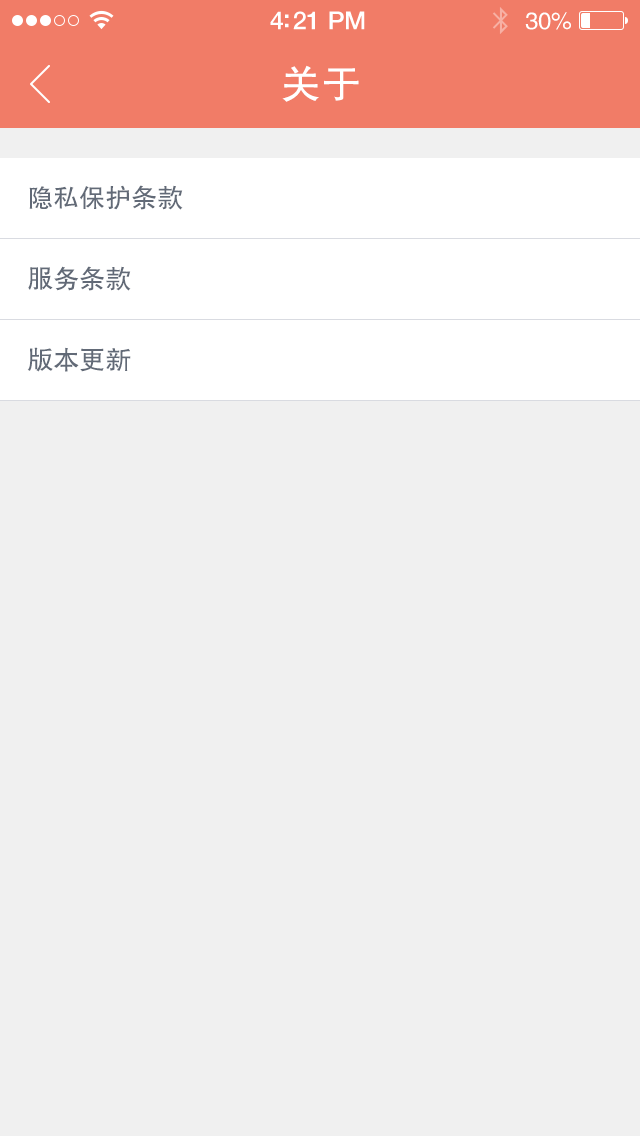
<style>
.page{position:relative;width:640px;height:1136px;background:#f0f0f0}
.page>*{position:absolute;margin:0}
.t1{font:25px "HelveticaNeue-Medium";letter-spacing:-0.02em;color:#ffffff}
.t2{font:24px "FZHTJW--GB1-0";letter-spacing:-0.02em;color:#ffffff}
.t3{font:40px "FZHTJW--GB1-0";color:#ffffff}
.t4{font:26px "FZHTJW--GB1-0";color:#626a77}
</style>
<div class="page">
<p class="t1" style="left:270px;top:11px;width:95px;height:19px">4:21 PM</p>
<p class="t2" style="left:525px;top:12px;width:46px;height:18px">30%</p>
<p class="t3" style="left:282px;top:65px;width:77px;height:37px">关于</p>
<p class="t4" style="left:29px;top:185px;width:154px;height:25px">隐私保护条款</p>
<p class="t4" style="left:28px;top:266px;width:103px;height:25px">服务条款</p>
<p class="t4" style="left:27px;top:347px;width:104px;height:25px">版本更新</p>
</div>
